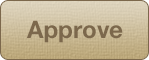
<style>
.page{position:relative;width:149px;height:60px}
.page>*{position:absolute;margin:0}
.t1{font:24px "HelveticaNeue-Bold";color:#7c684c}
</style>
<div class="page">
<p class="t1" style="left:26px;top:20px;width:97px;height:23px">Approve</p>
</div>
